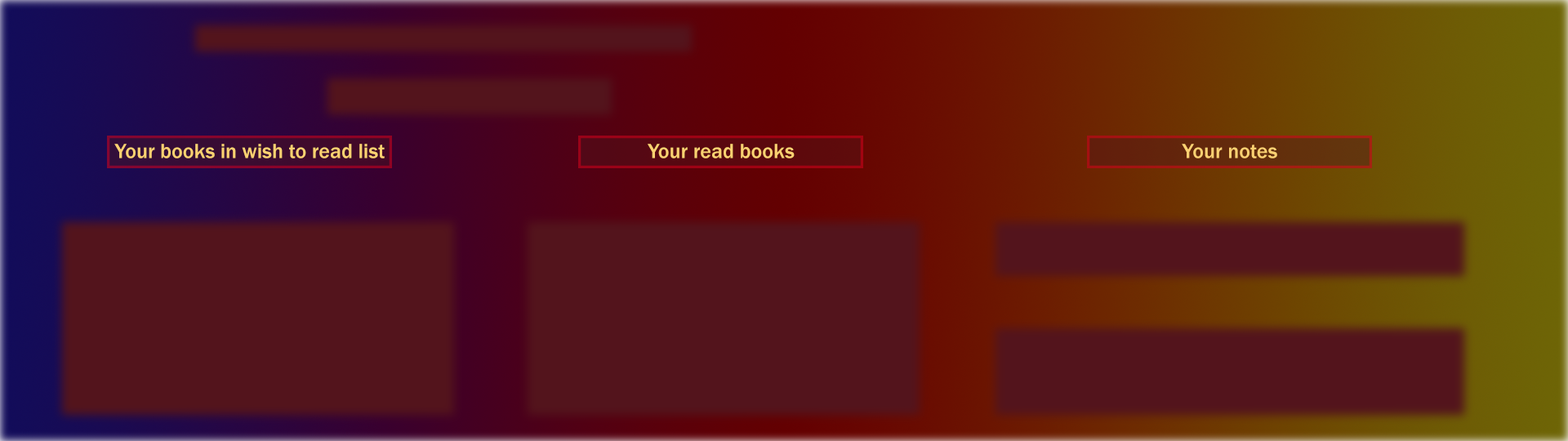
<style>
.page{position:relative;width:1568px;height:441px;background:#53141c}
.page>*{position:absolute;margin:0}
.t1{font:21.2px "FranklinGothic-Medium";color:#fdd171}
</style>
<div class="page">
<p class="t1" style="left:114px;top:144px;width:271px;height:14px">Your books in wish to read list</p>
<p class="t1" style="left:648px;top:144px;width:147px;height:14px">Your read books</p>
<p class="t1" style="left:1182px;top:144px;width:95px;height:14px">Your notes</p>
</div>
